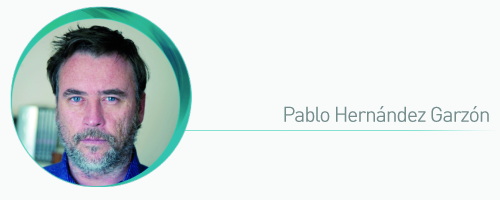
<style>
.page{position:relative;width:500px;height:200px;background:#f9fafa}
.page>*{position:absolute;margin:0}
.t1{font:21px "DIN-Regular";letter-spacing:-0.05em;color:#768d8d}
</style>
<div class="page">
<p class="t1" style="left:284px;top:106px;width:205px;height:16px">Pablo Hernández Garzón</p>
</div>
